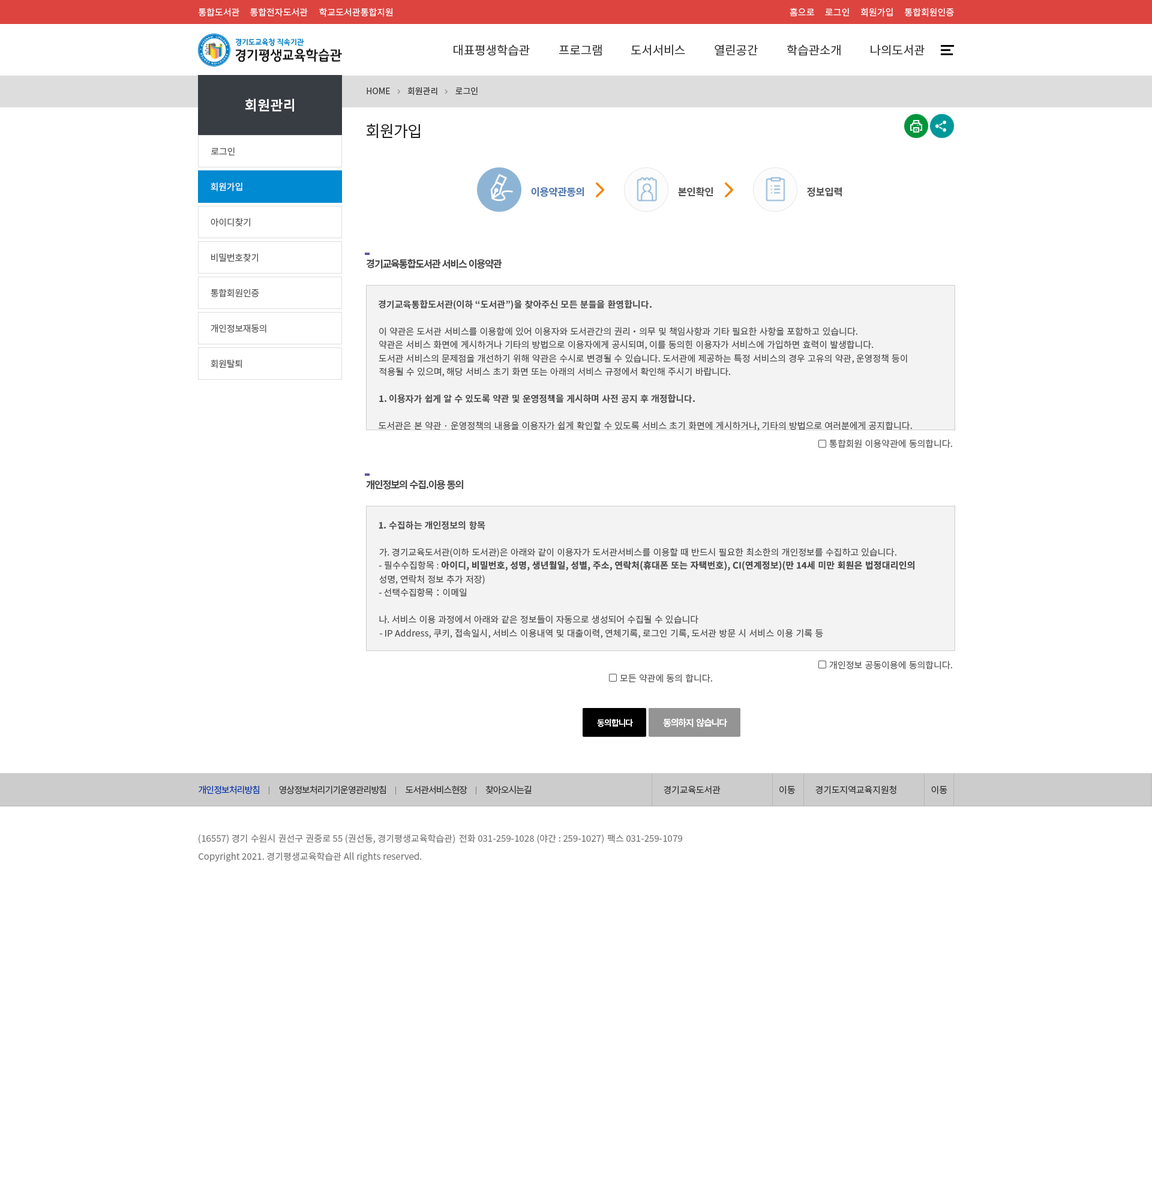
<style>
.page{position:relative;width:1152px;height:1200px;background:#ffffff}
.page>*{position:absolute;margin:0}
.t1{font:9px "NotoSansKR-Regular";color:#ffffff}
.t2{font:12px "NotoSansKR-Regular";color:#333333}
.t3{font:8.4px "NotoSansKR-Regular";letter-spacing:-0.005em;color:#363636}
.t4{font:13.8px "NotoSansKR-Bold";letter-spacing:0.005em;color:#ffffff}
.t5{font:15.6px "NotoSansKR-Regular";letter-spacing:-0.025em;color:#222222}
.t6{font:9px "NotoSansKR-Regular";color:#555555}
.t7{font:9px "NotoSansKR-Regular";letter-spacing:-0.01em;color:#ffffff}
.t8{font:9.9px "NotoSansKR-Bold";letter-spacing:-0.01em;color:#5179b0}
.t9{font:9.9px "NotoSansKR-Bold";letter-spacing:-0.01em;color:#555555}
.t10{font:9px "NotoSansKR-Regular";letter-spacing:-0.01em;color:#555555}
.t11{font:9px "NotoSansKR-Regular";letter-spacing:-0.015em;color:#555555}
.t12{font:9.9px "NotoSansKR-Bold";letter-spacing:-0.09em;color:#4c4c4c}
.t13{font:9px "NotoSansKR-Bold";letter-spacing:0.005em;color:#4c4c4c}
.t14{font:9px "NotoSansKR-Regular";letter-spacing:-0.02em;color:#555555}
.t15{font:9px "NotoSansKR-Regular";color:#4c4c4c}
.t16{font:9px "NotoSansKR-Bold";color:#4c4c4c}
.t17{font:9.9px "NotoSansKR-Bold";letter-spacing:-0.085em;color:#4c4c4c}
.t18{font:9px "NotoSansKR-Bold";letter-spacing:0.011em;color:#4c4c4c}
.t19{font:9px "NotoSansKR-Regular";letter-spacing:0.011em;color:#4c4c4c}
.t20{font:9px "NotoSansKR-Regular";letter-spacing:0.005em;color:#4c4c4c}
.t21{font:8.4px "NotoSansKR-Bold";letter-spacing:-0.075em;color:#ffffff}
.t22{font:9px "NotoSansKR-Bold";letter-spacing:-0.075em;color:#ffffff}
.t23{font:9px "NotoSansKR-Regular";letter-spacing:-0.065em;color:#0033a8}
.t24{font:9px "NotoSansKR-Regular";letter-spacing:-0.065em;color:#3b3b3b}
.t25{font:9px "NotoSansKR-Regular";letter-spacing:-0.015em;color:#3b3b3b}
.t26{font:9px "NotoSansKR-Regular";letter-spacing:-0.008em;color:#3b3b3b}
.t27{font:7.8px "NotoSansKR-Regular";letter-spacing:-0.065em;color:#888888}
.t28{font:9px "NotoSansKR-Regular";letter-spacing:0.005em;color:#777777}
</style>
<div class="page">
<p class="t1" style="left:198px;top:8px;width:41px;height:9px">통합도서관</p>
<p class="t1" style="left:250px;top:8px;width:58px;height:9px">통합전자도서관</p>
<p class="t1" style="left:319px;top:8px;width:74px;height:9px">학교도서관통합지원</p>
<p class="t1" style="left:790px;top:8px;width:24px;height:8px">홈으로</p>
<p class="t1" style="left:825px;top:8px;width:24px;height:8px">로그인</p>
<p class="t1" style="left:861px;top:8px;width:32px;height:9px">회원가입</p>
<p class="t1" style="left:904px;top:8px;width:50px;height:9px">통합회원인증</p>
<p class="t2" style="left:454px;top:44px;width:76px;height:12px">대표평생학습관</p>
<p class="t2" style="left:559px;top:44px;width:43px;height:12px">프로그램</p>
<p class="t2" style="left:631px;top:44px;width:54px;height:12px">도서서비스</p>
<p class="t2" style="left:715px;top:44px;width:43px;height:12px">열린공간</p>
<p class="t2" style="left:787px;top:44px;width:54px;height:12px">학습관소개</p>
<p class="t2" style="left:871px;top:44px;width:54px;height:12px">나의도서관</p>
<p class="t3" style="left:367px;top:88px;width:23px;height:6px">HOME</p>
<p class="t3" style="left:407px;top:87px;width:30px;height:8px">회원관리</p>
<p class="t3" style="left:455px;top:87px;width:23px;height:8px">로그인</p>
<p class="t4" style="left:245px;top:98px;width:49px;height:14px">회원관리</p>
<p class="t5" style="left:366px;top:124px;width:54px;height:15px">회원가입</p>
<p class="t6" style="left:211px;top:147px;width:24px;height:8px">로그인</p>
<p class="t7" style="left:211px;top:182px;width:31px;height:9px">회원가입</p>
<p class="t8" style="left:531px;top:187px;width:53px;height:10px">이용약관동의</p>
<p class="t9" style="left:678px;top:187px;width:35px;height:10px">본인확인</p>
<p class="t9" style="left:807px;top:187px;width:35px;height:10px">정보입력</p>
<p class="t10" style="left:211px;top:218px;width:39px;height:9px">아이디찾기</p>
<p class="t11" style="left:211px;top:253px;width:47px;height:9px">비밀번호찾기</p>
<p class="t12" style="left:366px;top:259px;width:136px;height:10px">경기교육통합도서관 서비스 이용약관</p>
<p class="t11" style="left:211px;top:289px;width:48px;height:9px">통합회원인증</p>
<p class="t13" style="left:378px;top:299px;width:274px;height:11px">경기교육통합도서관(이하 “도서관”)을 찾아주신 모든 분들을 환영합니다.</p>
<p class="t14" style="left:211px;top:324px;width:55px;height:9px">개인정보재동의</p>
<p class="t15" style="left:379px;top:327px;width:478px;height:9px">이 약관은 도서관 서비스를 이용함에 있어 이용자와 도서관간의 권리 ˙ 의무 및 책임사항과 기타 필요한 사항을 포함하고 있습니다.</p>
<p class="t15" style="left:379px;top:340px;width:495px;height:10px">약관은 서비스 화면에 게시하거나 기타의 방법으로 이용자에게 공시되며, 이를 동의힌 이용자가 서비스에 가입하면 효력이 발생합니다.</p>
<p class="t14" style="left:211px;top:359px;width:31px;height:9px">회원탈퇴</p>
<p class="t15" style="left:379px;top:354px;width:528px;height:10px">도서관 서비스의 문제점을 개선하기 위해 약관은 수시로 변경될 수 있습니다. 도서관에 제공하는 특정 서비스의 경우 고유의 약관, 운영정책 등이</p>
<p class="t15" style="left:379px;top:367px;width:351px;height:10px">적용될 수 있으며, 해당 서비스 초기 화면 또는 아래의 서비스 규정에서 확인해 주시기 바랍니다.</p>
<p class="t16" style="left:379px;top:394px;width:316px;height:9px">1. 이용자가 쉽게 알 수 있도록 약관 및 운영정책을 게시하며 사전 공지 후 개정합니다.</p>
<p class="t15" style="left:379px;top:421px;width:533px;height:10px">도서관은 본 약관 · 운영정책의 내용을 이용자가 쉽게 확인할 수 있도록 서비스 초기 화면에 게시하거나, 기타의 방법으로 여러분에게 공지합니다.</p>
<p class="t6" style="left:829px;top:439px;width:123px;height:9px">통합회원 이용약관에 동의합니다.</p>
<p class="t17" style="left:366px;top:479px;width:97px;height:11px">개인정보의 수집.이용 동의</p>
<p class="t13" style="left:379px;top:521px;width:106px;height:9px">1. 수집하는 개인정보의 항목</p>
<p class="t15" style="left:379px;top:548px;width:517px;height:9px">가. 경기교육도서관(이하 도서관)은 아래와 같이 이용자가 도서관서비스를 이용할 때 반드시 필요한 최소한의 개인정보를 수집하고 있습니다.</p>
<p class="t18" style="left:379px;top:561px;width:535px;height:10px"><span class="t19">- 필수수집항목 : </span>아이디, 비밀번호, 성명, 생년월일, 성별, 주소, 연락처(휴대폰 또는 자택번호), CI(연계정보)(만 14세 미만 회원은 법정대리인의</p>
<p class="t15" style="left:379px;top:575px;width:106px;height:9px">성명, 연락처 정보 추가 저장)</p>
<p class="t15" style="left:379px;top:588px;width:88px;height:9px">- 선택수집항목：이메일</p>
<p class="t15" style="left:379px;top:615px;width:319px;height:9px">나. 서비스 이용 과정에서 아래와 같은 정보들이 자동으로 생성되어 수집될 수 있습니다</p>
<p class="t20" style="left:379px;top:629px;width:444px;height:9px">- IP Address, 쿠키, 접속일시, 서비스 이용내역 및 대출이력, 연체기록, 로그인 기록, 도서관 방문 시 서비스 이용 기록 등</p>
<p class="t6" style="left:829px;top:661px;width:123px;height:9px">개인정보 공동이용에 동의합니다.</p>
<p class="t6" style="left:620px;top:674px;width:92px;height:9px">모든 약관에 동의 합니다.</p>
<p class="t21" style="left:597px;top:719px;width:36px;height:8px">동의합니다</p>
<p class="t22" style="left:663px;top:718px;width:64px;height:9px">동의하지  않습니다</p>
<p class="t23" style="left:199px;top:785px;width:60px;height:9px">개인정보처리방침</p>
<p class="t24" style="left:279px;top:785px;width:107px;height:9px">영상정보처리기기운영관리방침</p>
<p class="t24" style="left:406px;top:785px;width:61px;height:9px">도서관서비스현장</p>
<p class="t24" style="left:485px;top:785px;width:47px;height:9px">찾아오시는길</p>
<p class="t25" style="left:664px;top:785px;width:57px;height:9px">경기교육도서관</p>
<p class="t26" style="left:779px;top:785px;width:16px;height:9px">이동</p>
<p class="t26" style="left:815px;top:785px;width:81px;height:9px">경기도지역교육지원청</p>
<p class="t26" style="left:931px;top:785px;width:16px;height:9px">이동</p>
<p class="t27" style="left:269px;top:786px;width:0px;height:8px">｜</p>
<p class="t27" style="left:395px;top:786px;width:1px;height:8px">｜</p>
<p class="t27" style="left:476px;top:786px;width:0px;height:8px">｜</p>
<p class="t28" style="left:199px;top:834px;width:256px;height:10px">(16557) 경기 수원시 권선구 권중로 55 (권선동, 경기평생교육학습관)</p>
<p class="t28" style="left:459px;top:834px;width:145px;height:10px">전화 031-259-1028 (야간 : 259-1027)</p>
<p class="t28" style="left:607px;top:834px;width:75px;height:9px">팩스 031-259-1079</p>
<p class="t28" style="left:199px;top:852px;width:223px;height:10px">Copyright 2021. 경기평생교육학습관 All rights reserved.</p>
</div>
